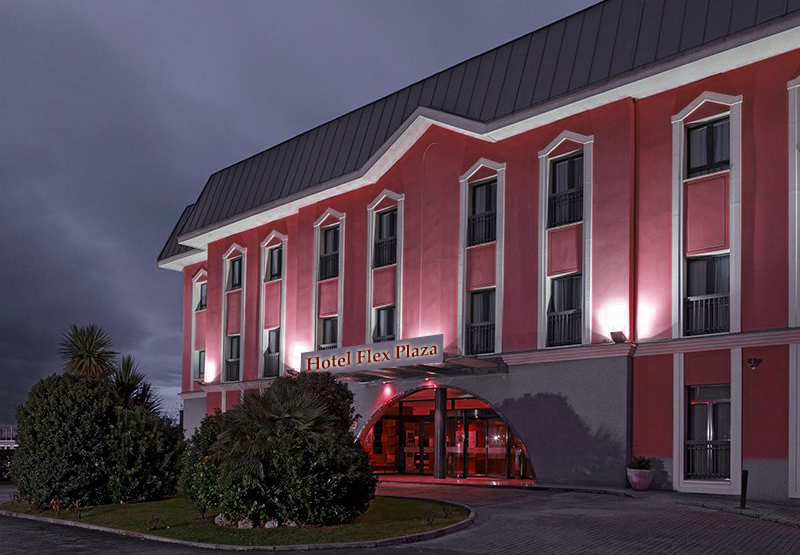
<style>
.page{position:relative;width:800px;height:555px}
.page>*{position:absolute;margin:0}
.t1{font:18.1px "PalatinoLinotype-Bold";color:#730909}
</style>
<div class="page">
<p class="t1" style="left:306px;top:344px;width:132px;height:27px;rotate:-7deg">Hotel Flex Plaza</p>
</div>
